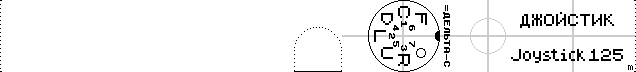
<style>
.page{position:relative;width:636px;height:72px;background:#ffffff}
.page>*{position:absolute;margin:0}
.t1{font:16px "ZX 6x8";color:#000000}
</style>
<div class="page">
<p class="t1" style="left:520px;top:12px;width:94px;height:16px">ДЖОЙСТИК</p>
<p class="t1" style="left:511px;top:49px;width:112px;height:14px">Joystick125</p>
</div>
